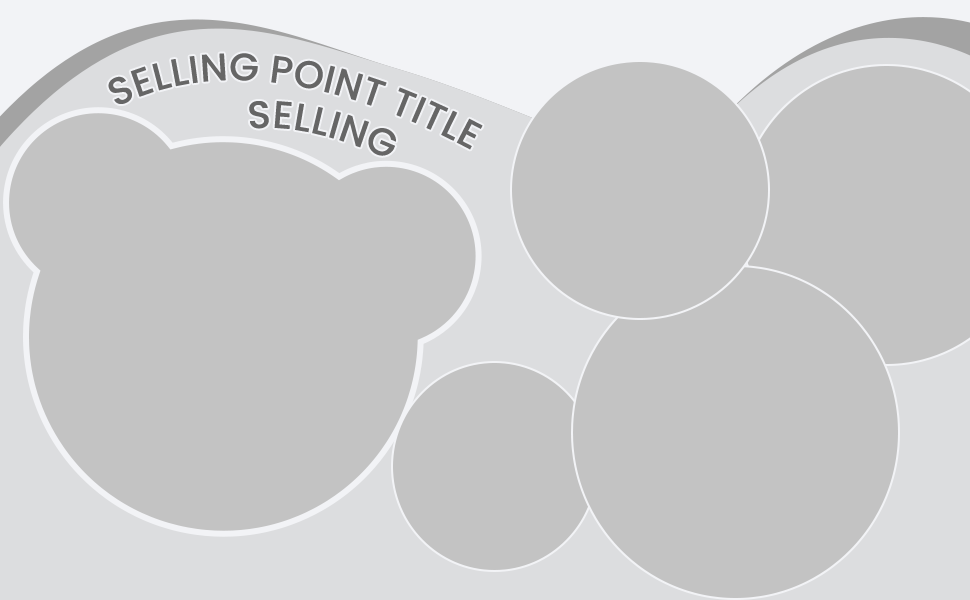
<style>
.page{position:relative;width:970px;height:600px;background:#c3c3c3}
.page>*{position:absolute;margin:0}
.t1{font:38.4px "Poppins-Medium";color:#666666;text-transform:uppercase}
</style>
<div class="page">
<p class="t1" style="left:108px;top:53px;width:375px;height:97px;rotate:8deg">Selling point title writing</p>
<p class="t1" style="left:249px;top:101px;width:147px;height:55px;rotate:8deg">Selling point title writing</p>
</div>
